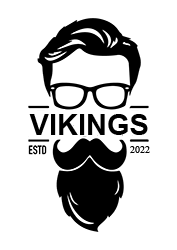
<style>
.page{position:relative;width:177px;height:250px;background:#ffffff}
.page>*{position:absolute;margin:0}
.t1{font:29px "Arial-BoldMT";color:#000000}
.t2{font:10px "TimesNewRomanPSMT";color:#000000}
</style>
<div class="page">
<p class="t1" style="left:29px;top:114px;width:119px;height:21px">VIKINGS</p>
<p class="t2" style="left:130px;top:146px;width:20px;height:7px">2022</p>
</div>
